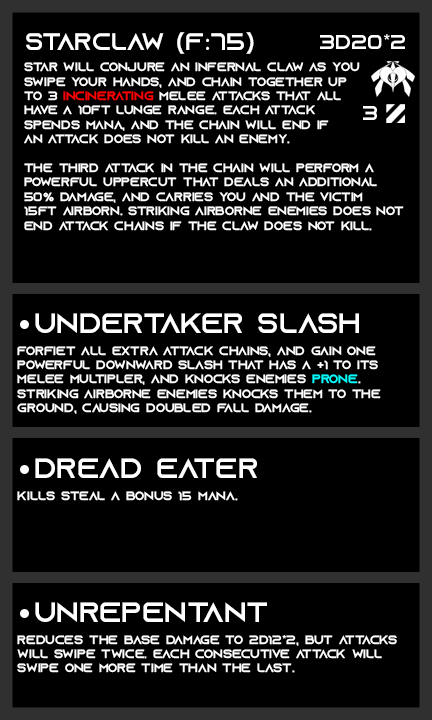
<style>
.page{position:relative;width:432px;height:720px;background:#000000}
.page>*{position:absolute;margin:0}
.t1{font:24px "AzonixRegular";color:#ffffff}
.t2{font:24px "MyriadPro-Regular";color:#ffffff}
.t3{font:20px "AzonixRegular";color:#ffffff}
.t4{font:12px "AzonixRegular";color:#ffffff}
.t5{font:12px "AzonixRegular";color:#ff0000}
.t6{font:28px "AzonixRegular";color:#ffffff}
.t7{font:12px "AzonixRegular";color:#00ffff}
</style>
<div class="page">
<p class="t1" style="left:26px;top:32px;width:228px;height:22px">starclaw (F<span class="t2">:</span>75)</p>
<p class="t3" style="left:320px;top:34px;width:85px;height:15px">3d20*2</p>
<p class="t4" style="left:24px;top:62px;width:380px;height:169px">star will conjure an infernal claw as you <br>swipe your hands, and chain together up <br>to 3 <span class="t5">incinerating</span> melee attacks that all <br>have a 10ft lunge range. Each attack <br>spends mana, and the chain will end if <br>an attack does not kill an enemy.<br><br>The third attack in the chain will perform a <br>powerful uppercut that deals an additional<br>50% damage, and carries you and the victim <br>15ft airborn. Striking airborne enemies does not<br>end attack chains if the claw does not kill.</p>
<p class="t3" style="left:363px;top:106px;width:14px;height:14px">3</p>
<p class="t6" style="left:35px;top:313px;width:324px;height:20px">undertaker slash</p>
<p class="t4" style="left:17px;top:346px;width:364px;height:68px">forfiet all extra attack chains, and gain one<br>powerful downward slash that has a +1 to its <br>melee multipler, and knocks enemies <span class="t7">prone</span>.<br>striking airborne enemies knocks them to the <br>ground, causing doubled fall damage.</p>
<p class="t6" style="left:35px;top:458px;width:222px;height:20px">dread eater</p>
<p class="t4" style="left:17px;top:491px;width:221px;height:10px">kills steal a bonus 15 mana.</p>
<p class="t6" style="left:35px;top:602px;width:232px;height:20px">unrepentant</p>
<p class="t4" style="left:17px;top:635px;width:380px;height:38px">reduces the base damage to 2d12*2, but attacks <br>will swipe twice. each consecutive attack will <br>swipe one more time than the last.</p>
</div>
